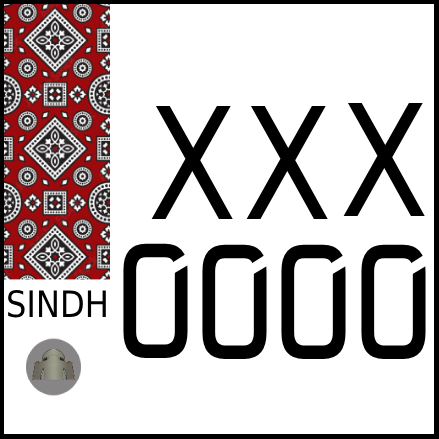
<style>
.page{position:relative;width:439px;height:439px;background:#ffffff}
.page>*{position:absolute;margin:0}
.t1{font:155px "DejaVuSans";color:#000000;scale:0.84 1}
.t2{font:36.4px "DejaVuSans";color:#000000;scale:0.88 1}
</style>
<div class="page">
<p class="t1" style="left:151px;top:106px;width:82px;height:113px">X</p>
<p class="t1" style="left:246px;top:106px;width:82px;height:113px">X</p>
<p class="t1" style="left:343px;top:103px;width:82px;height:113px">X</p>
<p class="t2" style="left:8px;top:290px;width:98px;height:28px">SINDH</p>
</div>
